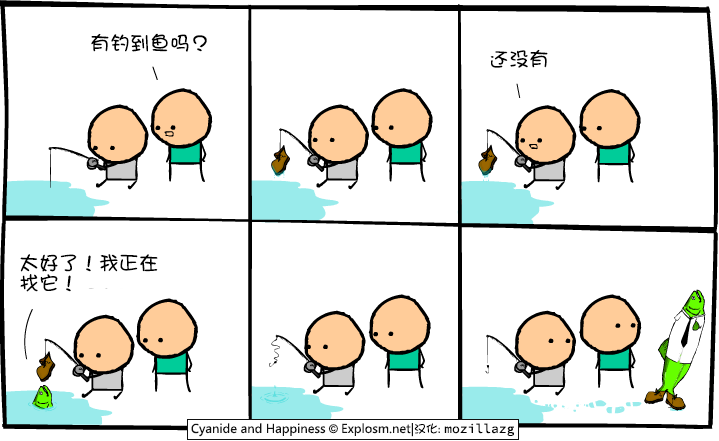
<style>
.page{position:relative;width:719px;height:441px;background:#ffffff}
.page>*{position:absolute;margin:0}
.t1{font:20px "DFGirl";color:#000000}
.t2{font:20px/20px "DFGirl";color:#000000}
</style>
<div class="page">
<p class="t1" style="left:91px;top:33px;width:116px;height:19px">有钓到鱼吗？</p>
<p class="t1" style="left:490px;top:49px;width:58px;height:19px">还没有</p>
<p class="t2" style="left:20px;top:254px;width:138px;height:38px">太好了！我正在<br>找它！</p>
</div>
